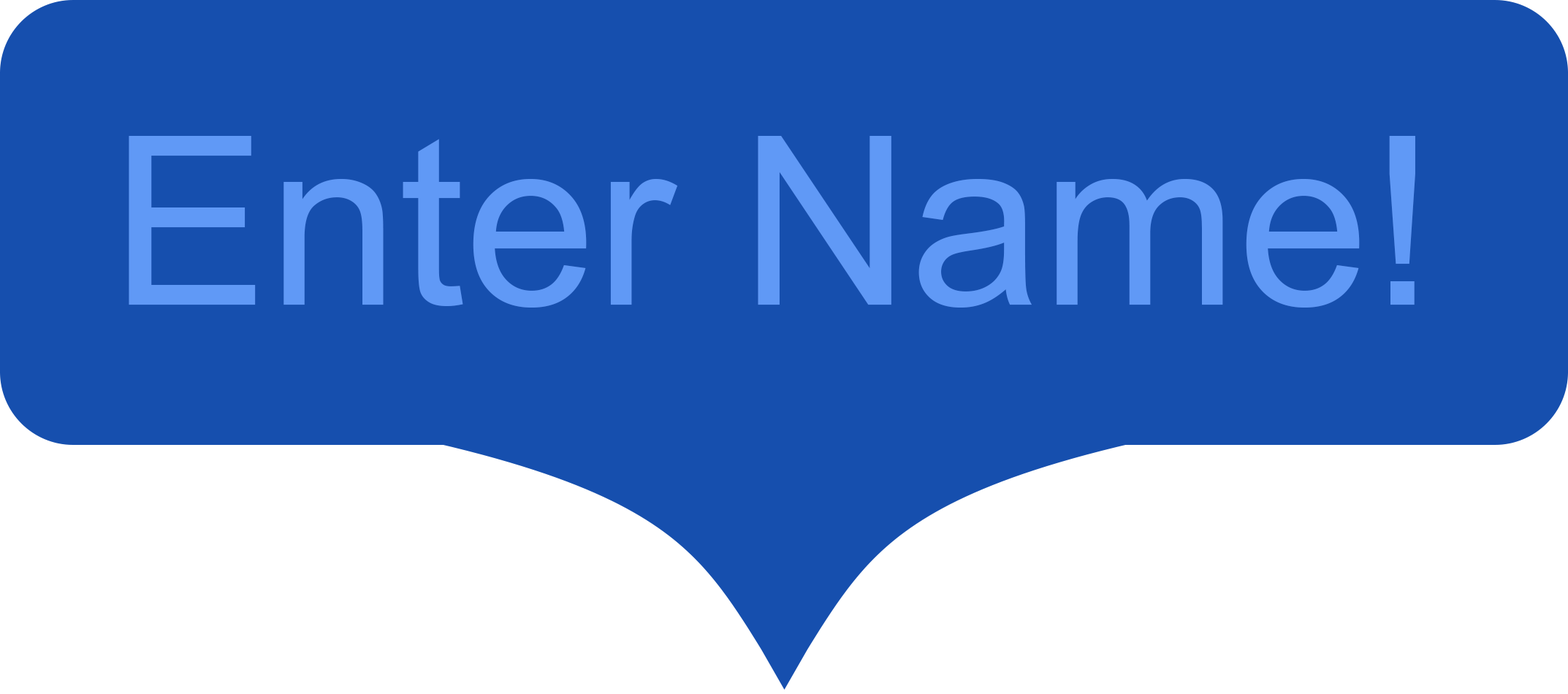
<style>
.page{position:relative;width:1568px;height:694px;background:#164fae}
.page>*{position:absolute;margin:0}
.t1{font:235.9px "ArialMT";color:#6099f6}
</style>
<div class="page">
<p class="t1" style="left:129px;top:136px;width:1286px;height:172px">Enter Name!</p>
</div>
